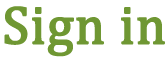
<style>
.page{position:relative;width:168px;height:61px;background:#ffffff}
.page>*{position:absolute;margin:0}
.t1{font:54.3px "Cambria";color:#6f9733;font-weight:bold}
</style>
<div class="page">
<p class="t1" style="left:4px;top:6px;width:161px;height:51px">Sign in</p>
</div>
